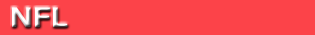
<style>
.page{position:relative;width:315px;height:35px;background:#fc4349}
.page>*{position:absolute;margin:0}
.t1{font:30px "Play-Bold"}
</style>
<div class="page">
<p class="t1" style="left:12px;top:7px;width:56px;height:20px">NFL</p>
</div>
